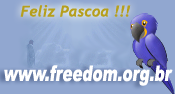
<style>
.page{position:relative;width:175px;height:94px;background:#91a7d0}
.page>*{position:absolute;margin:0}
.t1{font:15px "Trebuchet-BoldItalic";color:#b69f1d}
.t2{font:21.6px "Arial-Black";color:#ffffff;font-style:italic;scale:0.69 1}
</style>
<div class="page">
<p class="t1" style="left:20px;top:5px;width:111px;height:12px">Feliz Pascoa !!!</p>
<p class="t2" style="left:4px;top:65px;width:169px;height:21px">www.freedom.org.br</p>
</div>
